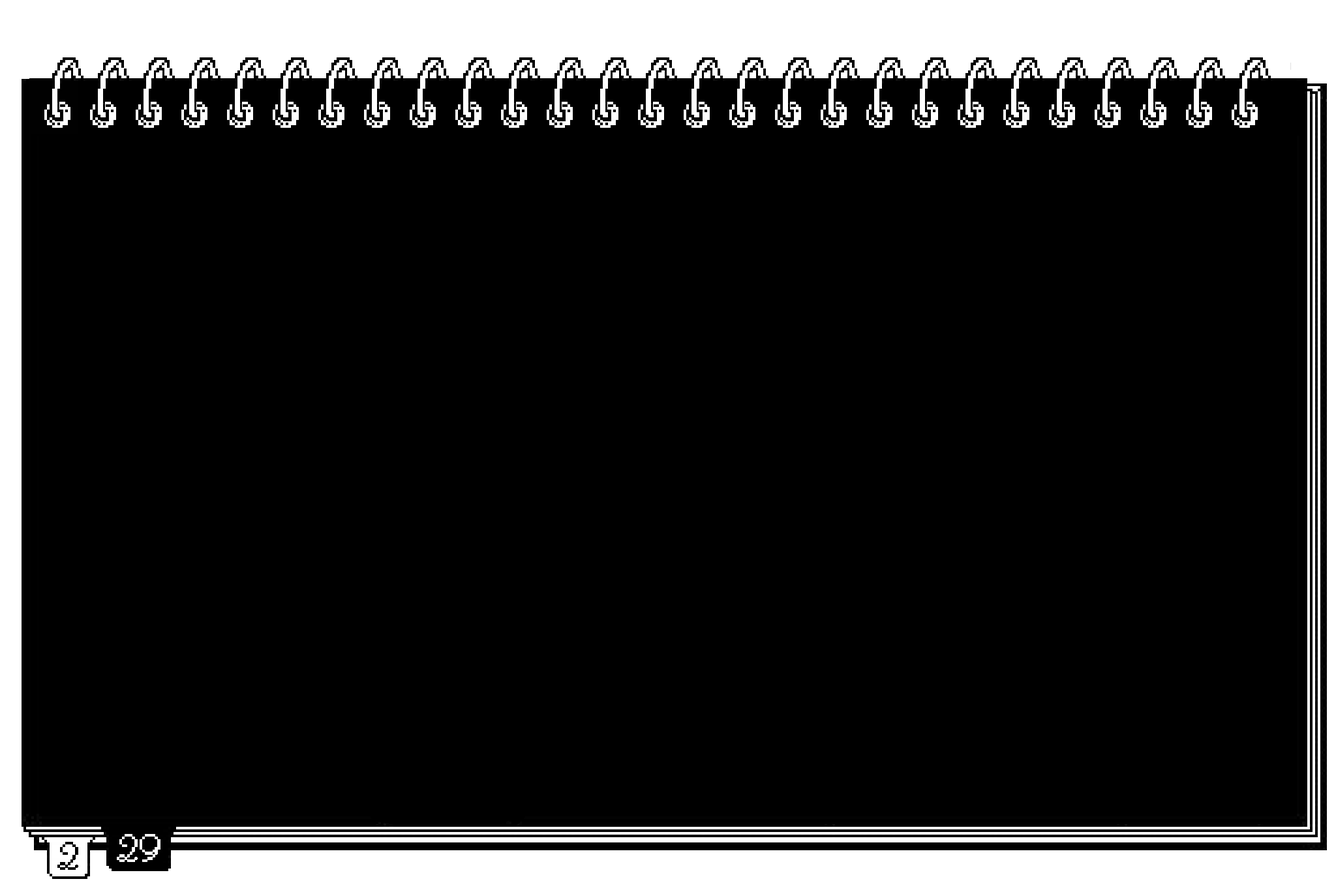
<style>
.page{position:relative;width:1336px;height:892px;background:#000000}
.page>*{position:absolute;margin:0}
.t1{font:43.7px "Cursive";color:#000000}
.t2{font:43.7px "Cursive";color:#ffffff}
</style>
<div class="page">
<p class="t1" style="left:57px;top:842px;width:21px;height:29px">2</p>
<p class="t2" style="left:117px;top:834px;width:43px;height:29px">29</p>
</div>
